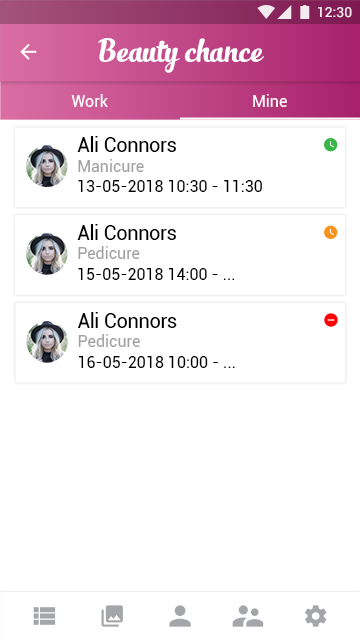
<style>
.page{position:relative;width:360px;height:640px;background:#ffffff}
.page>*{position:absolute;margin:0}
.t1{font:14px "Roboto-Medium";color:#ffffff}
.t2{font:24px "SlimTony-Italic";color:#ffffff}
.t3{font:16px "Roboto-Regular";color:#ffffff}
.t4{font:20px "Roboto-Regular";letter-spacing:-0.005em;color:#000000}
.t5{font:16px "Roboto-Regular";color:#a1a1a1}
.t6{font:16px "Roboto-Regular";color:#000000}
</style>
<div class="page">
<p class="t1" style="left:318px;top:7px;width:34px;height:11px">12:30</p>
<p class="t2" style="left:98px;top:38px;width:166px;height:35px">Beauty chance</p>
<p class="t3" style="left:71px;top:94px;width:37px;height:13px">Work</p>
<p class="t3" style="left:253px;top:94px;width:34px;height:13px">Mine</p>
<p class="t4" style="left:77px;top:136px;width:99px;height:16px">Ali Connors</p>
<p class="t5" style="left:78px;top:159px;width:66px;height:13px">Manicure</p>
<p class="t6" style="left:78px;top:180px;width:184px;height:12px">13-05-2018 10:30 - 11:30</p>
<p class="t4" style="left:77px;top:224px;width:99px;height:16px">Ali Connors</p>
<p class="t5" style="left:78px;top:246px;width:62px;height:13px">Pedicure</p>
<p class="t6" style="left:78px;top:268px;width:157px;height:12px">15-05-2018 14:00 - ...</p>
<p class="t4" style="left:78px;top:312px;width:99px;height:16px">Ali Connors</p>
<p class="t5" style="left:78px;top:334px;width:62px;height:13px">Pedicure</p>
<p class="t6" style="left:78px;top:356px;width:157px;height:12px">16-05-2018 10:00 - ...</p>
</div>
